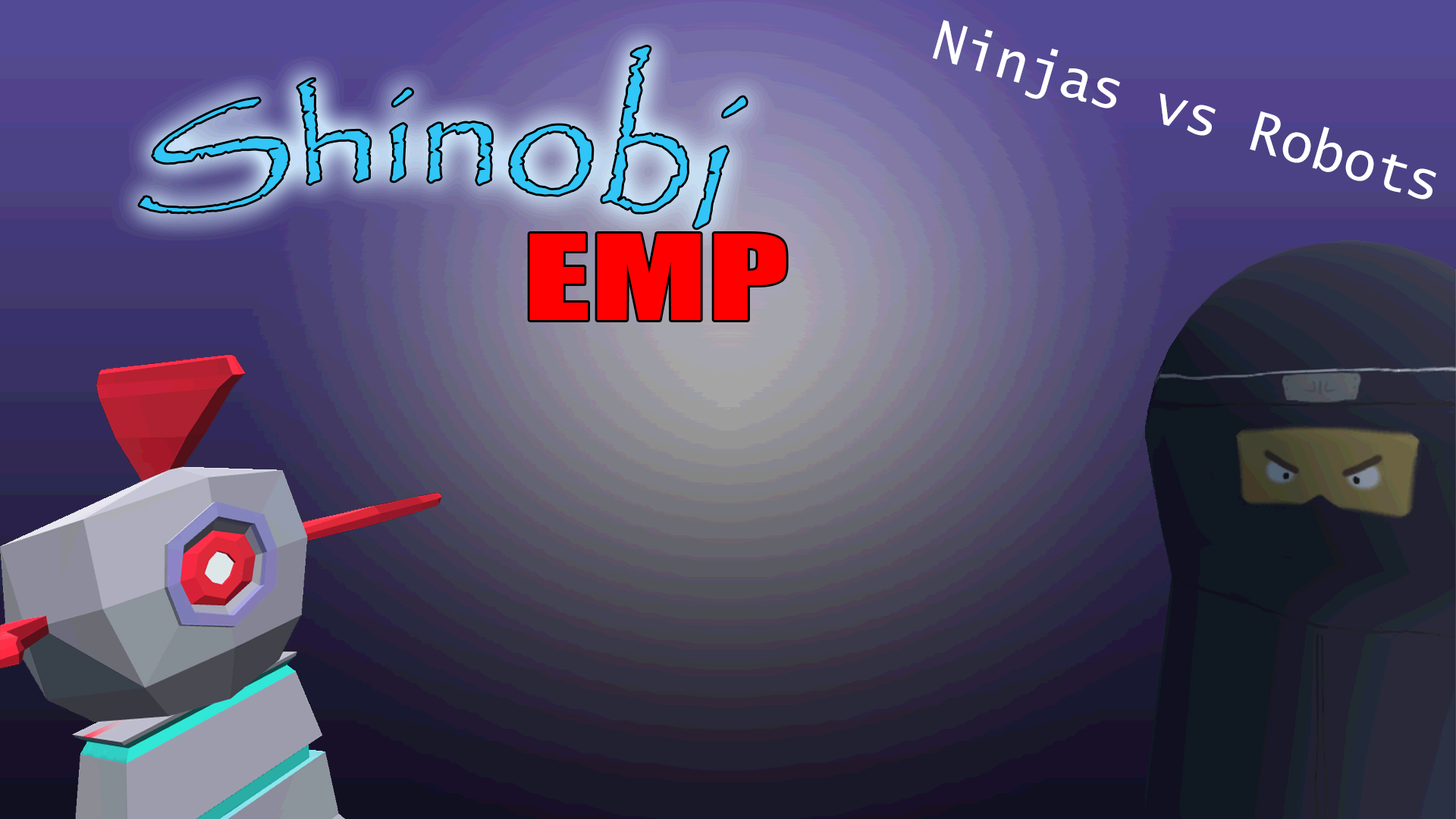
<style>
.page{position:relative;width:1456px;height:819px}
.page>*{position:absolute;margin:0}
.t1{font:54.6px "LucidaSans-Typewriter";color:#ffffff}
.t2{font:151.7px "Papyrus-Regular";color:#33c6f4}
.t3{font:109.5px "Impact";color:#ff0000;scale:1.48 1}
</style>
<div class="page">
<p class="t1" style="left:933px;top:20px;width:503px;height:179px;rotate:16deg">Ninjas vs Robots</p>
<p class="t2" style="left:140px;top:47px;width:606px;height:181px">Shinobi</p>
<p class="t3" style="left:529px;top:234px;width:257px;height:86px">EMP</p>
</div>
